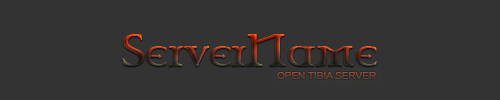
<style>
.page{position:relative;width:500px;height:100px;background:#333333}
.page>*{position:absolute;margin:0}
.t1{font:40px "CelticGaramondthe2nd"}
.t2{font:9px "ArialMT";text-transform:uppercase;scale:1.11 1}
</style>
<div class="page">
<p class="t1" style="left:122px;top:34px;width:255px;height:32px">ServerName</p>
<p class="t2" style="left:277px;top:72px;width:99px;height:7px">open tibia server</p>
</div>
